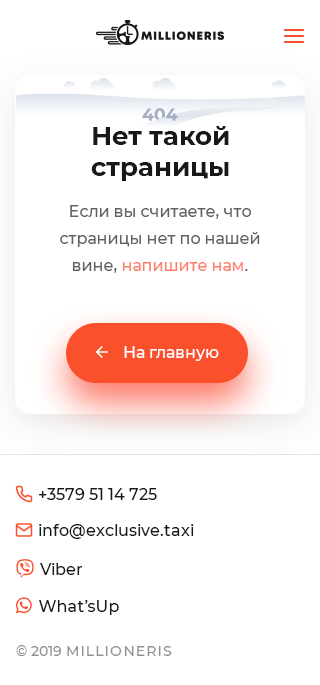
<style>
.page{position:relative;width:320px;height:685px;background:#ffffff}
.page>*{position:absolute;margin:0}
.t1{font:26px "Montserrat-Bold";color:#171919}
.t2{font:16px/27px "Montserrat-Medium";color:#616161}
.t3{font:16px "Montserrat-Medium";color:#ffffff}
.t4{font:16px "Montserrat-Medium";color:#171919}
.t5{font:14px "Montserrat-Medium";letter-spacing:0.1em;color:#929292}
.t6{font:14px "Montserrat-Medium";color:#929292}
</style>
<div class="page">
<p class="t1" style="left:91px;top:126px;width:138px;height:55px;text-align:center">Нет такой<br>страницы</p>
<p class="t2" style="left:60px;top:205px;width:200px;height:68px;text-align:center">Если вы считаете, что страницы нет по нашей вине, напишите нам.</p>
<p class="t3" style="left:124px;top:346px;width:95px;height:15px">На главную</p>
<p class="t4" style="left:39px;top:488px;width:118px;height:12px">+3579 51 14 725</p>
<p class="t4" style="left:39px;top:524px;width:155px;height:15px">info@exclusive.taxi</p>
<p class="t5" style="left:16px;top:645px;width:156px;height:11px"><span class="t6">© 2019 </span>MILLIONERIS</p>
</div>
